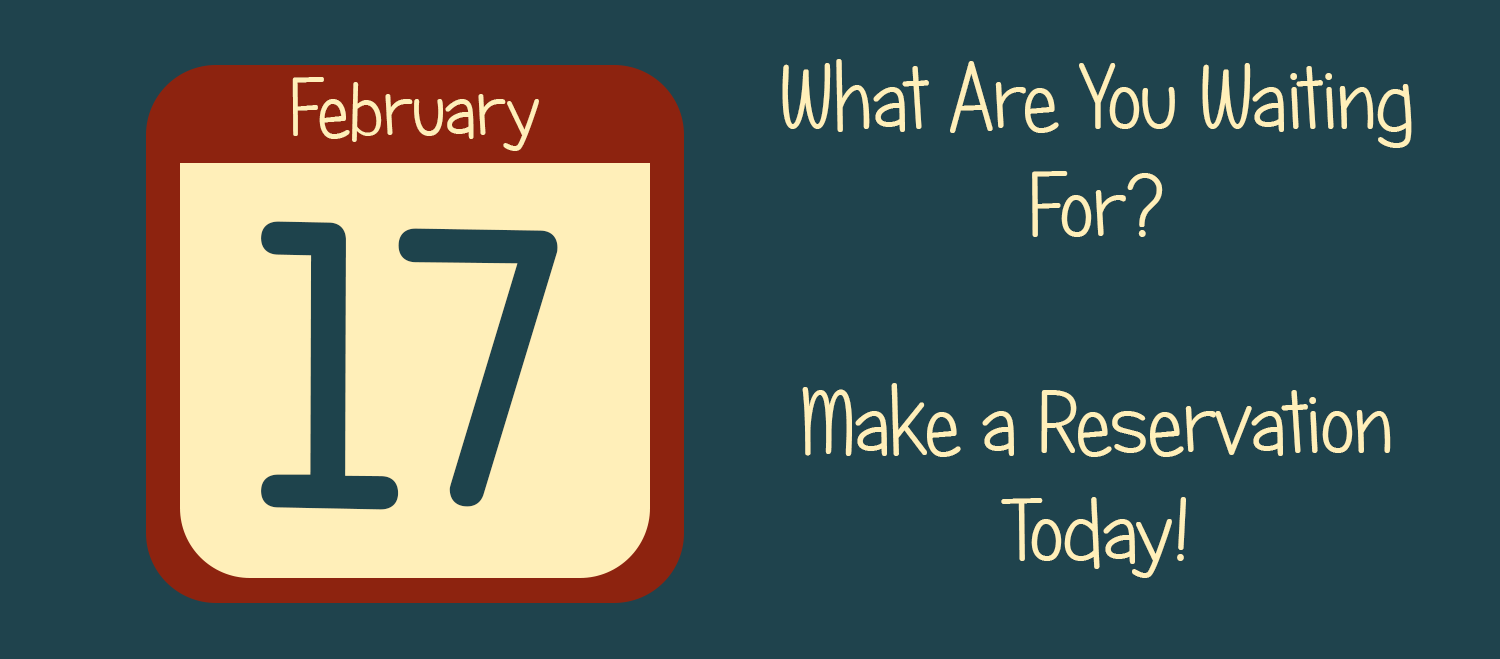
<style>
.page{position:relative;width:1500px;height:659px;background:#1f434d}
.page>*{position:absolute;margin:0}
.t1{font:90px "CandyRoundBTN";color:#ffefb9}
.t2{font:80px "CandyRoundBTN";color:#ffefb9}
.t3{font:400px "CandyRoundBTN";color:#1e434c;font-variant:small-caps;font-weight:bold}
</style>
<div class="page">
<p class="t1" style="left:782px;top:59px;width:630px;height:519px;text-align:center">What Are You Waiting For?<br> <br>Make a Reservation Today!</p>
<p class="t2" style="left:292px;top:77px;width:247px;height:74px">February</p>
<p class="t3" style="left:261px;top:221px;width:297px;height:289px">17</p>
</div>
